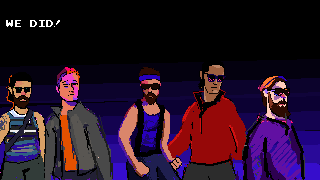
<style>
.page{position:relative;width:320px;height:180px;background:#000000}
.page>*{position:absolute;margin:0}
.t1{font:8px "PressStartReg";color:#ffffff}
</style>
<div class="page">
<p class="t1" style="left:6px;top:20px;width:54px;height:7px">WE DID!</p>
</div>
